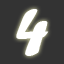
<style>
.page{position:relative;width:64px;height:64px;background:#333333}
.page>*{position:absolute;margin:0}
.t1{font:72px "ForteMT";color:#ffffff}
</style>
<div class="page">
<p class="t1" style="left:16px;top:9px;width:33px;height:47px">4</p>
</div>
